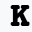
<style>
.page{position:relative;width:32px;height:32px;background:#f7f9fa}
.page>*{position:absolute;margin:0}
.t1{font:32px "AmericanTypewriter-CondensedBold";color:#000000}
</style>
<div class="page">
<p class="t1" style="left:10px;top:5px;width:20px;height:21px">K</p>
</div>
